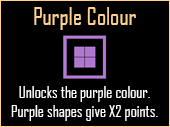
<style>
.page{position:relative;width:170px;height:127px;background:#000000}
.page>*{position:absolute;margin:0}
.t1{font:24px "AgencyFB-Reg";color:#ffd28c}
.t2{font:16px "AgencyFB-Reg";color:#ffffff}
</style>
<div class="page">
<p class="t1" style="left:34px;top:7px;width:102px;height:23px">Purple Colour</p>
<p class="t2" style="left:11px;top:86px;width:147px;height:35px;text-align:center">Unlocks the purple colour. Purple shapes give X2 points.</p>
</div>
